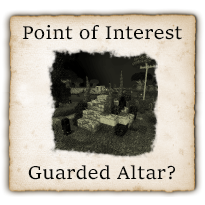
<style>
.page{position:relative;width:205px;height:205px}
.page>*{position:absolute;margin:0}
.t1{font:19.4px "Sitka-Small";color:#080806}
</style>
<div class="page">
<p class="t1" style="left:23px;top:25px;width:159px;height:15px">Point of Interest</p>
<p class="t1" style="left:28px;top:165px;width:147px;height:15px">Guarded Altar?</p>
</div>
